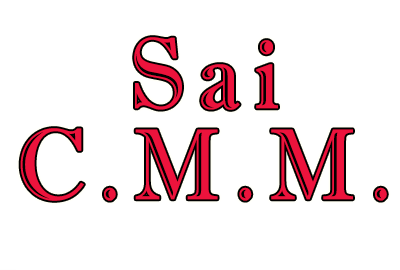
<style>
.page{position:relative;width:400px;height:270px;background:#ffffff}
.page>*{position:absolute;margin:0}
.t1{font:100.9px/91px "ImprintMT-Shadow";letter-spacing:0.135em;color:#ec133c;scale:0.93 1}
</style>
<div class="page">
<p class="t1" style="left:20px;top:37px;width:367px;height:164px;text-align:center">Sai <br>C.M.M.k<br>.</p>
</div>
